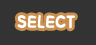
<style>
.page{position:relative;width:96px;height:45px;background:#333333}
.page>*{position:absolute;margin:0}
.t1{font:22px "KoreanCT-R";color:#ffffff}
</style>
<div class="page">
<p class="t1" style="left:17px;top:15px;width:58px;height:14px">SELECT</p>
</div>
